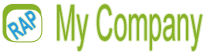
<style>
.page{position:relative;width:221px;height:56px;background:#ffffff}
.page>*{position:absolute;margin:0}
.t1{font:50px "ArialMT";color:#87b127;scale:0.5 1}
.t2{font:24px "Arial-BoldMT";color:#279ddb;scale:0.6 1}
</style>
<div class="page">
<p class="t1" style="left:57px;top:4px;width:146px;height:47px">My Company</p>
<p class="t2" style="left:7px;top:10px;width:29px;height:30px;rotate:-34deg">RAP</p>
</div>
